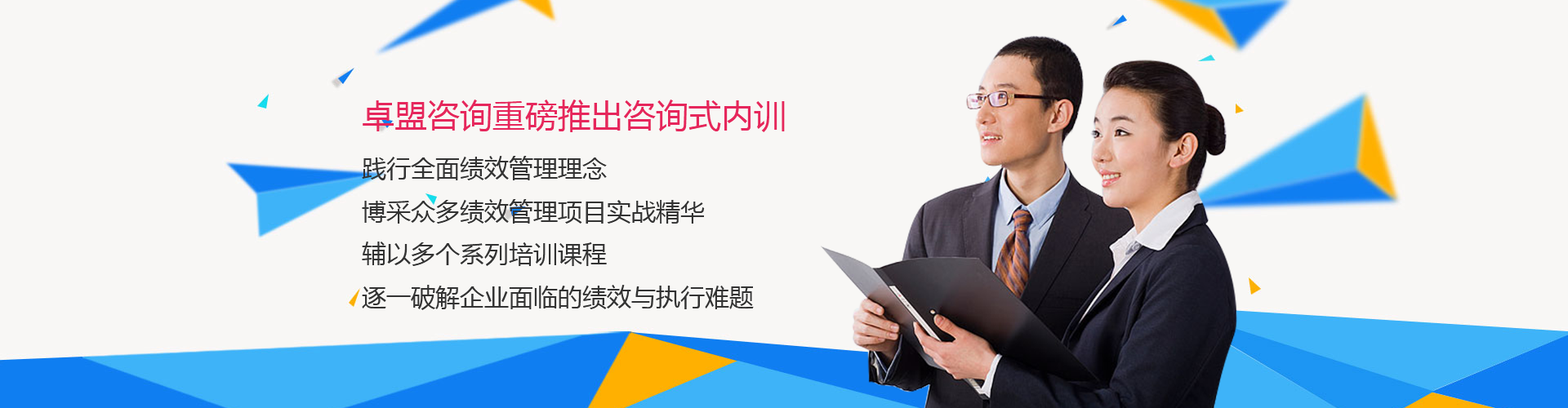
<style>
.page{position:relative;width:1568px;height:408px;background:#f8f7f5}
.page>*{position:absolute;margin:0}
.t1{font:24.5px "MicrosoftYaHei";color:#333333}
.t2{font:32.7px "MicrosoftYaHei";color:#e6265c}
</style>
<div class="page">
<p class="t1" style="left:362px;top:100px;width:423px;height:210px;text-align:justify"><span class="t2">卓盟咨询重磅推出咨询式内训<br></span>践行全面绩效管理理念<br>博采众多绩效管理项目实战精华<br>辅以多个系列培训课程<br>逐一破解企业面临的绩效与执行难题</p>
</div>
